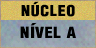
<style>
.page{position:relative;width:96px;height:48px}
.page>*{position:absolute;margin:0}
.t1{font:14.7px "HelveticaLT-Condensed-Black";letter-spacing:0.04em;color:#000000;scale:1.1 1}
.t2{font:15.5px "HelveticaLT-Condensed-Black";letter-spacing:0.05em;color:#000000;scale:1.1 1}
</style>
<div class="page">
<p class="t1" style="left:21px;top:1px;width:54px;height:16px">NÚCLEO</p>
<p class="t2" style="left:20px;top:23px;width:59px;height:16px">NÍVEL A</p>
</div>
